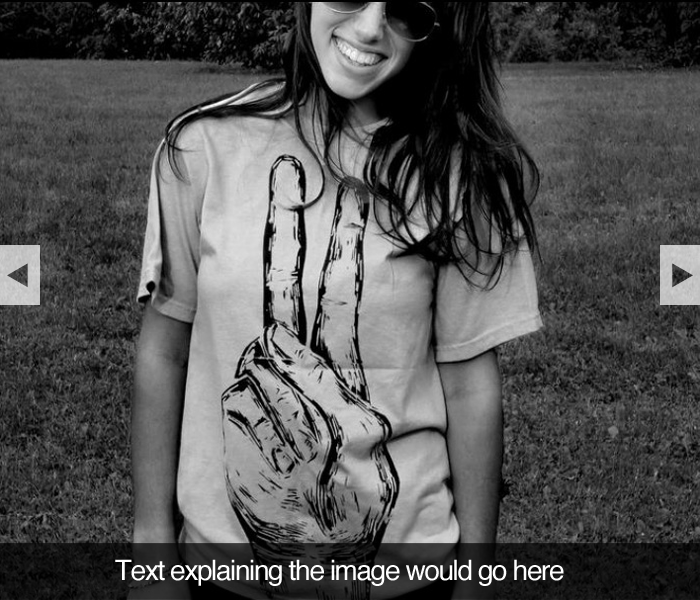
<style>
.page{position:relative;width:700px;height:600px}
.page>*{position:absolute;margin:0}
.t1{font:28px "Helvetica";letter-spacing:-0.05em;color:#ffffff}
</style>
<div class="page">
<p class="t1" style="left:115px;top:559px;width:449px;height:27px">Text explaining the image would go here</p>
</div>
